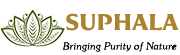
<style>
.page{position:relative;width:180px;height:55px;background:#ffffff}
.page>*{position:absolute;margin:0}
.t1{font:23.3px "NomadaIncise-Bold";color:#ac8230}
.t2{font:9.8px "SouvenirStd-LightItalic";color:#000000}
</style>
<div class="page">
<p class="t1" style="left:66px;top:13px;width:113px;height:18px">SUPHALA</p>
<p class="t2" style="left:62px;top:42px;width:115px;height:10px">Bringing Purity of Nature</p>
</div>
